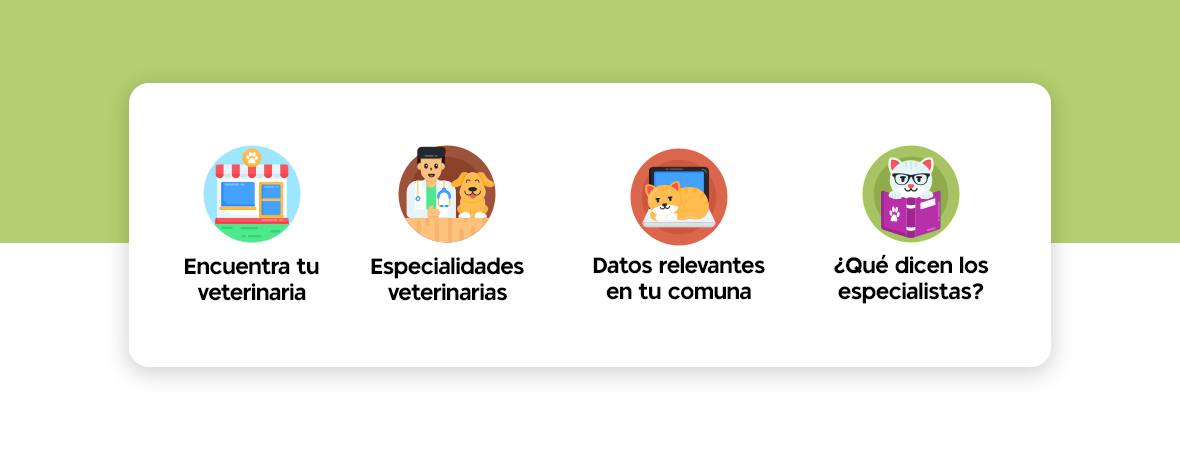
<style>
.page{position:relative;width:1180px;height:450px;background:#ffffff}
.page>*{position:absolute;margin:0}
.t1{font:22px/26px "TangoSans";color:#000000}
</style>
<div class="page">
<p class="t1" style="left:371px;top:257px;width:153px;height:44px;text-align:center">Especialidades veterinarias</p>
<p class="t1" style="left:593px;top:256px;width:172px;height:44px;text-align:center">Datos relevantes en tu comuna</p>
<p class="t1" style="left:834px;top:254px;width:155px;height:50px;text-align:center">¿Qué dicen los especialistas?</p>
<p class="t1" style="left:185px;top:258px;width:134px;height:43px;text-align:center">Encuentra tu veterinaria</p>
</div>
